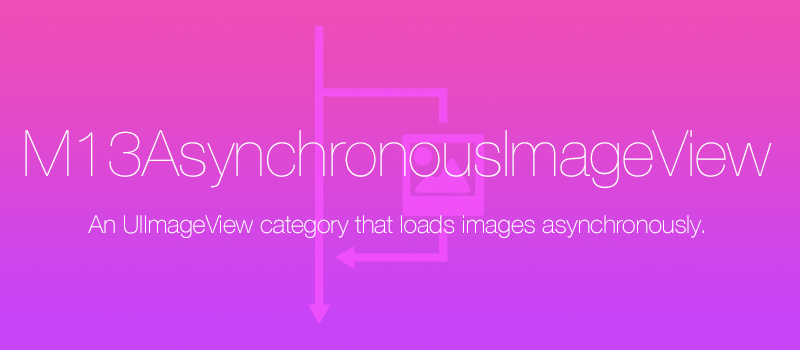
<style>
.page{position:relative;width:800px;height:350px}
.page>*{position:absolute;margin:0}
.t1{font:64px "HelveticaNeue-UltraLight";letter-spacing:-0.007em;color:#ffffff}
.t2{font:25px "HelveticaNeue-Thin";letter-spacing:-0.007em;color:#ffffff}
</style>
<div class="page">
<p class="t1" style="left:25px;top:130px;width:747px;height:58px">M13AsynchronousImageView</p>
<p class="t2" style="left:88px;top:215px;width:616px;height:23px">An UIImageView category that loads images asynchronously.</p>
</div>
